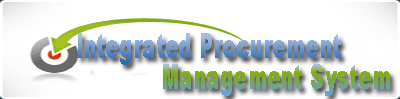
<style>
.page{position:relative;width:400px;height:99px;background:#ffffff}
.page>*{position:absolute;margin:0}
.t1{font:34px "Arial-Black";letter-spacing:0.02em;scale:0.57 1}
</style>
<div class="page">
<p class="t1" style="left:78px;top:33px;width:263px;height:32px">Integrated Procurement</p>
<p class="t1" style="left:163px;top:64px;width:227px;height:32px">Management System</p>
</div>
